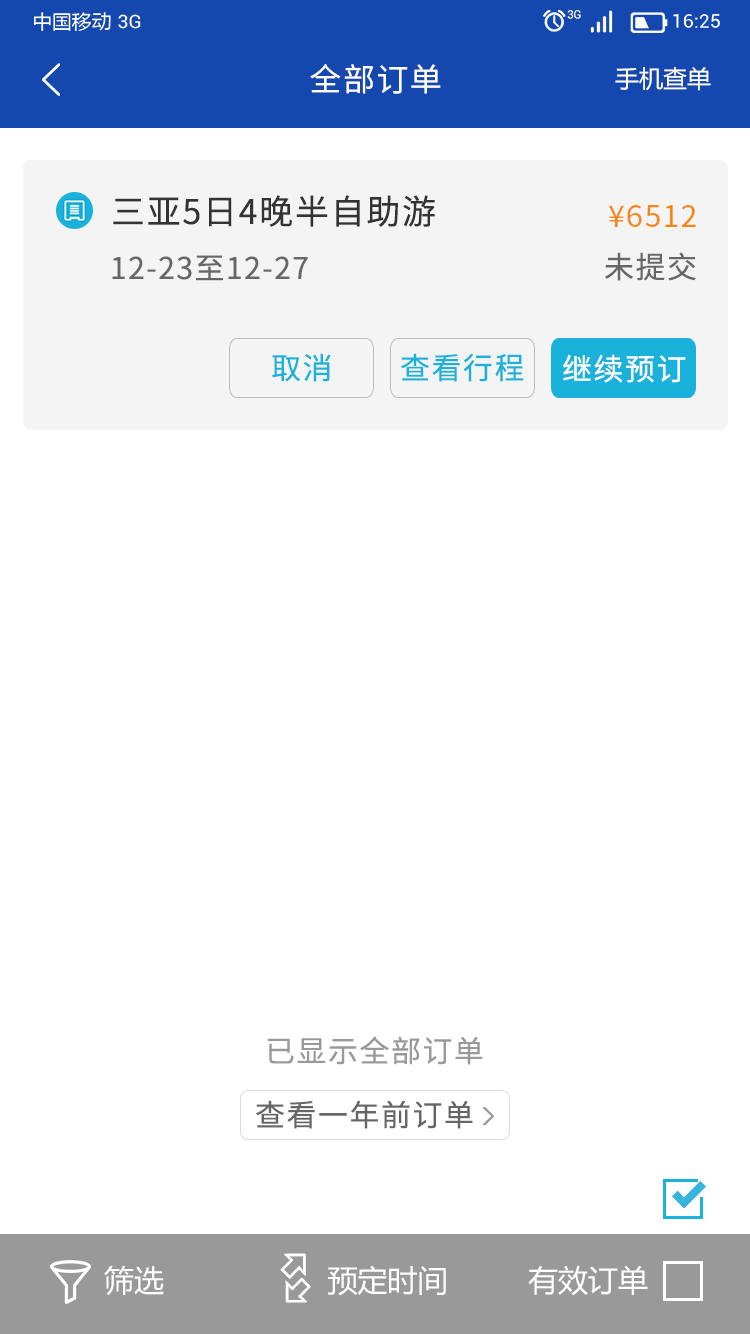
<style>
.page{position:relative;width:750px;height:1334px;background:#ffffff}
.page>*{position:absolute;margin:0}
.t1{font:32px "SourceHanSansCN-Regular";letter-spacing:0.05em;color:#ffffff}
.t2{font:24px "MicrosoftYaHei";color:#ffffff}
.t3{font:34px "SourceHanSansCN-Regular";letter-spacing:0.05em;color:#333333}
.t4{font:30px "SourceHanSansCN-Regular";letter-spacing:0.05em;color:#f88412}
.t5{font:30px "SourceHanSansCN-Regular";letter-spacing:0.05em;color:#666666}
.t6{font:30px "SourceHanSansCN-Regular";letter-spacing:0.05em;color:#1ab2db}
.t7{font:30px "SourceHanSansCN-Regular";letter-spacing:0.05em;color:#ffffff}
.t8{font:30px "SourceHanSansCN-Regular";letter-spacing:0.05em;color:#999999}
.t9{font:30px "MicrosoftYaHei";color:#ffffff}
</style>
<div class="page">
<p class="t1" style="left:310px;top:64px;width:131px;height:30px">全部订单</p>
<p class="t2" style="left:615px;top:67px;width:96px;height:24px">手机查单</p>
<p class="t3" style="left:113px;top:195px;width:322px;height:32px">三亚5日4晚半自助游</p>
<p class="t4" style="left:608px;top:205px;width:88px;height:22px">¥6512</p>
<p class="t5" style="left:112px;top:255px;width:196px;height:26px">12-23至12-27</p>
<p class="t5" style="left:605px;top:252px;width:91px;height:29px">未提交</p>
<p class="t6" style="left:272px;top:353px;width:59px;height:29px">取消</p>
<p class="t6" style="left:401px;top:353px;width:123px;height:29px">查看行程</p>
<p class="t7" style="left:563px;top:354px;width:123px;height:29px">继续预订</p>
<p class="t8" style="left:267px;top:1036px;width:216px;height:29px">已显示全部订单</p>
<p class="t5" style="left:256px;top:1100px;width:217px;height:29px">查看一年前订单</p>
<p class="t9" style="left:328px;top:1265px;width:118px;height:31px">预定时间</p>
<p class="t9" style="left:528px;top:1265px;width:120px;height:31px">有效订单</p>
<p class="t9" style="left:104px;top:1266px;width:60px;height:29px">筛选</p>
</div>
